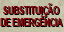
<style>
.page{position:relative;width:64px;height:32px}
.page>*{position:absolute;margin:0}
.t1{font:11px/12px "Arial-BoldMT";letter-spacing:-0.04em;color:#85070e;scale:0.71 1}
.t2{font:11px/12px "Arial-BoldMT";letter-spacing:-0.04em;color:#85070e;scale:0.73 1}
</style>
<div class="page">
<p class="t1" style="left:0px;top:3px;width:63px;height:23px;text-align:center"><span class="t2">SUBSTITUIÇÃO<br></span>DE EMERGÊNCIA</p>
</div>
